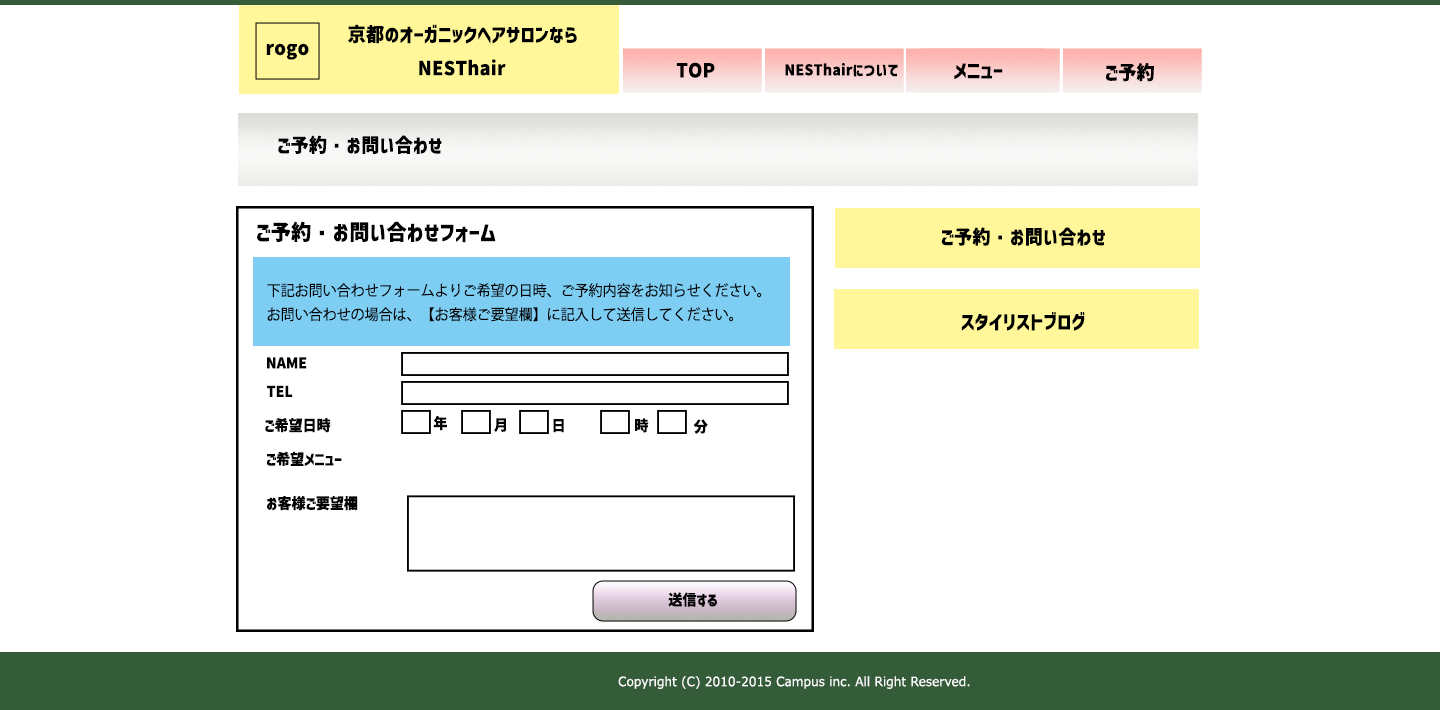
<style>
.page{position:relative;width:1440px;height:710px;background:#ffffff}
.page>*{position:absolute;margin:0}
.t1{font:19.1px "Corporate-Logo-Bold-ver2";letter-spacing:0.02em;color:#000000;scale:0.94 1}
.t2{font:14.8px "Corporate-Logo-Bold-ver2";letter-spacing:0.02em;color:#000000;scale:0.94 1}
.t3{font:19.1px "Corporate-Logo-Bold-ver2";letter-spacing:0.02em;color:#010101;scale:0.94 1}
.t4{font:21.2px "Corporate-Logo-Bold-ver2";letter-spacing:0.02em;color:#010101;scale:0.94 1}
.t5{font:14.8px/24px "KozGoPr6N-Regular";color:#030303;scale:0.94 1}
.t6{font:14.8px "Corporate-Logo-Bold-ver2";color:#030303;scale:0.94 1}
.t7{font:12.7px "Meiryo";letter-spacing:0.02em;color:#ffffff;scale:0.94 1}
</style>
<div class="page">
<p class="t1" style="left:348px;top:24px;width:229px;height:20px">京都のオーガニックヘアサロンなら</p>
<p class="t1" style="left:266px;top:43px;width:43px;height:17px">rogo</p>
<p class="t1" style="left:419px;top:59px;width:87px;height:17px">NESThair</p>
<p class="t1" style="left:676px;top:62px;width:39px;height:16px">TOP</p>
<p class="t2" style="left:785px;top:63px;width:113px;height:14px">NESThairについて</p>
<p class="t1" style="left:954px;top:63px;width:49px;height:16px">メニュー</p>
<p class="t1" style="left:1106px;top:63px;width:48px;height:19px">ご予約</p>
<p class="t3" style="left:278px;top:135px;width:164px;height:19px">ご予約・お問い合わせ</p>
<p class="t4" style="left:257px;top:221px;width:239px;height:22px">ご予約・お問い合わせフォーム</p>
<p class="t3" style="left:941px;top:227px;width:164px;height:19px">ご予約・お問い合わせ</p>
<p class="t5" style="left:267px;top:283px;width:495px;height:39px">下記お問い合わせフォームよりご希望の日時、ご予約内容をお知らせください。<br>お問い合わせの場合は、【お客様ご要望欄】に記入して送信してください。</p>
<p class="t1" style="left:961px;top:312px;width:124px;height:19px">スタイリストブログ</p>
<p class="t6" style="left:267px;top:357px;width:40px;height:12px">NAME</p>
<p class="t6" style="left:267px;top:385px;width:26px;height:12px">TEL</p>
<p class="t6" style="left:265px;top:418px;width:66px;height:15px">ご希望日時</p>
<p class="t6" style="left:433px;top:415px;width:14px;height:16px">年</p>
<p class="t6" style="left:494px;top:418px;width:12px;height:14px">月</p>
<p class="t6" style="left:553px;top:419px;width:11px;height:14px">日</p>
<p class="t6" style="left:635px;top:418px;width:14px;height:15px">時</p>
<p class="t6" style="left:693px;top:419px;width:15px;height:15px">分</p>
<p class="t6" style="left:266px;top:451px;width:76px;height:15px">ご希望メニュー</p>
<p class="t6" style="left:267px;top:496px;width:91px;height:15px">お客様ご要望欄</p>
<p class="t6" style="left:668px;top:592px;width:49px;height:15px">送信する</p>
<p class="t7" style="left:618px;top:676px;width:352px;height:13px">Copyright (C) 2010-2015 Campus inc. All Right Reserved.</p>
</div>
